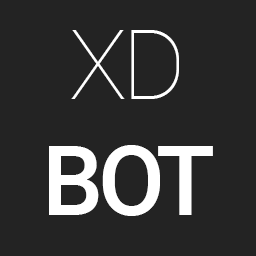
<style>
.page{position:relative;width:256px;height:256px;background:#232323}
.page>*{position:absolute;margin:0}
.t1{font:97px "Roboto-Medium";letter-spacing:-0.05em;color:#ffffff;text-transform:uppercase}
.t2{font:97px "Roboto-Thin";letter-spacing:-0.05em;color:#ffffff}
</style>
<div class="page">
<p class="t1" style="left:49px;top:30px;width:164px;height:186px;text-align:center"><span class="t2">XD<br></span>bot</p>
</div>
